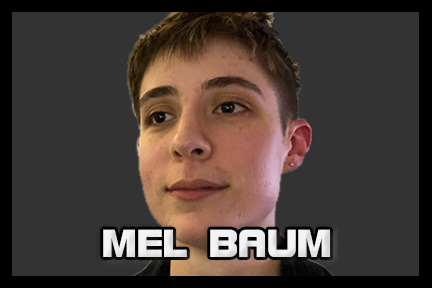
<style>
.page{position:relative;width:432px;height:288px;background:#333333}
.page>*{position:absolute;margin:0}
.t1{font:41.7px "BolsterBold";color:#f3f3f3}
</style>
<div class="page">
<p class="t1" style="left:103px;top:229px;width:227px;height:28px">MEL BAUM</p>
</div>
